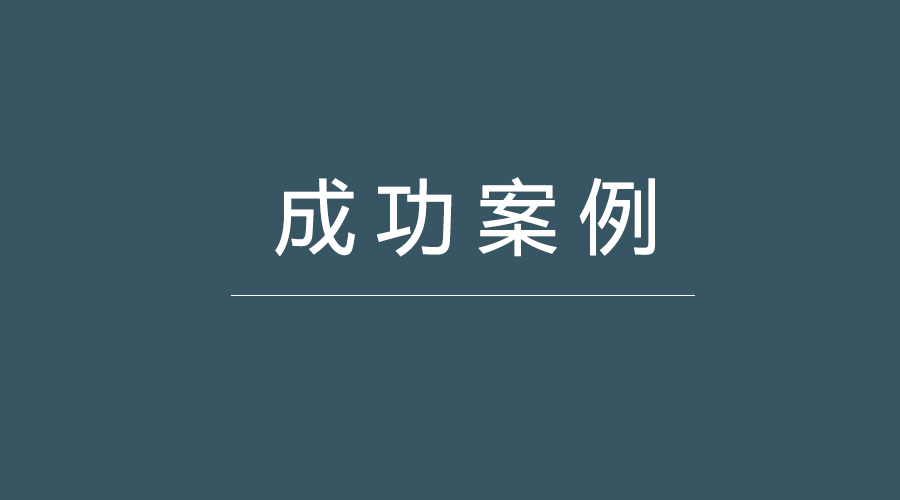
<style>
.page{position:relative;width:900px;height:500px;background:#385563}
.page>*{position:absolute;margin:0}
.t1{font:80px "MicrosoftYaHei";letter-spacing:0.24em;color:#ffffff;font-weight:bold}
</style>
<div class="page">
<p class="t1" style="left:275px;top:177px;width:380px;height:80px">成功案例</p>
</div>
